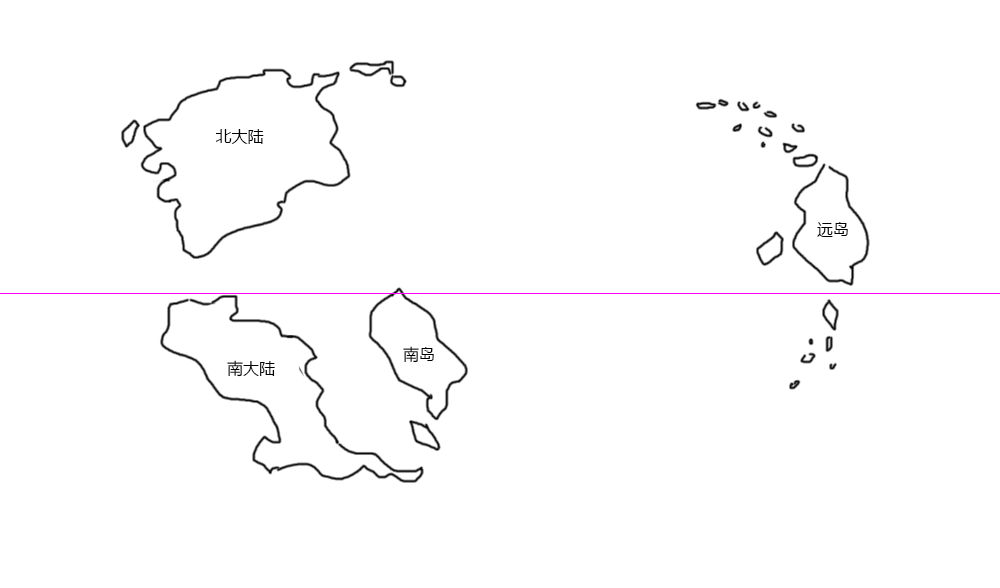
<style>
.page{position:relative;width:1000px;height:588px;background:#ffffff}
.page>*{position:absolute;margin:0}
.t1{font:16px "MicrosoftYaHei";color:#000000}
</style>
<div class="page">
<p class="t1" style="left:215px;top:129px;width:49px;height:15px">北大陆</p>
<p class="t1" style="left:817px;top:222px;width:31px;height:15px">远岛</p>
<p class="t1" style="left:403px;top:346px;width:31px;height:17px">南岛</p>
<p class="t1" style="left:227px;top:360px;width:48px;height:17px">南大陆</p>
</div>
